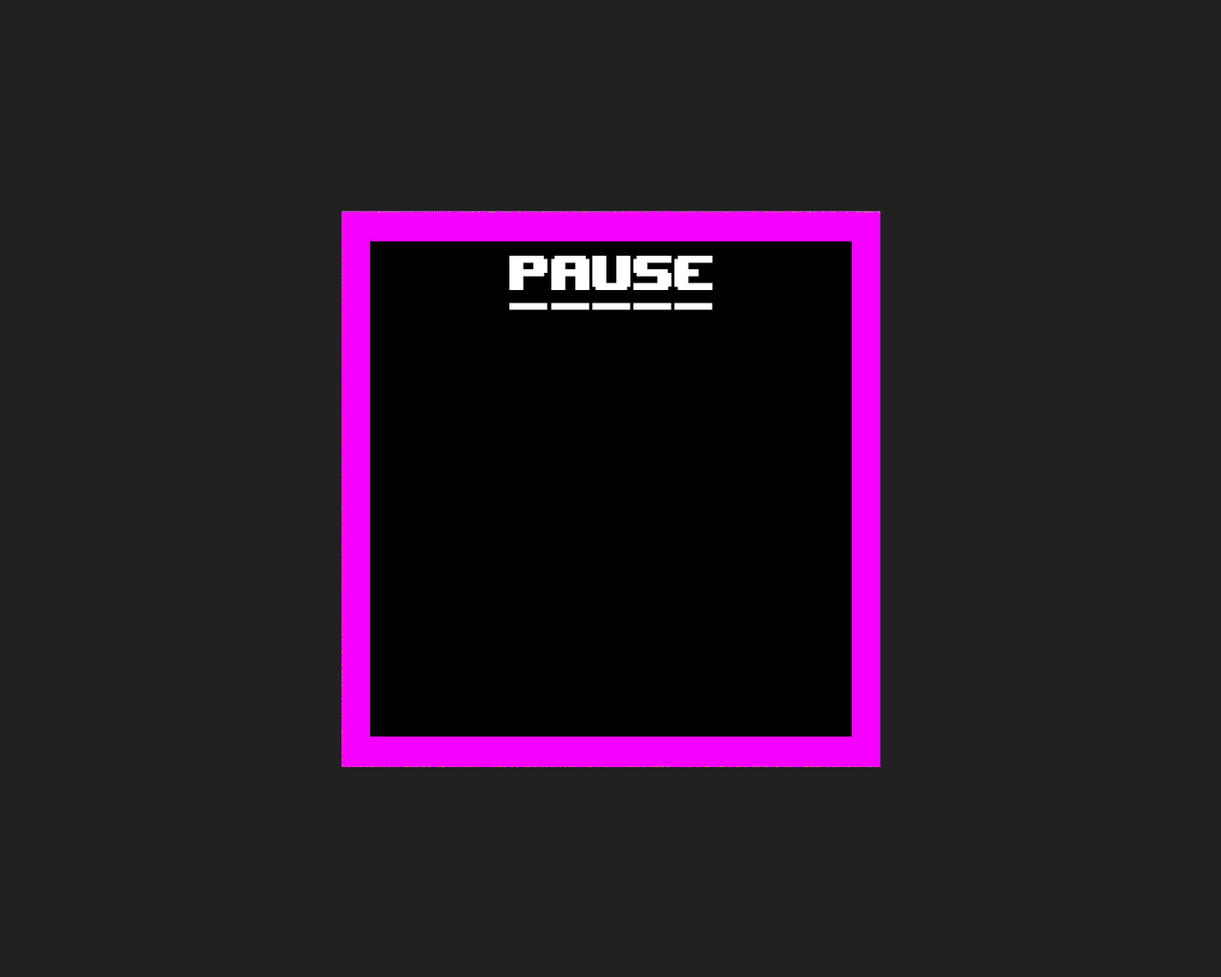
<style>
.page{position:relative;width:1221px;height:977px;background:#212121}
.page>*{position:absolute;margin:0}
.t1{font:68.7px "UpheavalTT-BRK-";color:#ffffff}
.t2{font:63.9px "UpheavalTT-BRK-";color:#ffffff;scale:1.07 1}
</style>
<div class="page">
<p class="t1" style="left:509px;top:256px;width:203px;height:34px">PAUSE</p>
<p class="t2" style="left:509px;top:302px;width:203px;height:8px">-----</p>
</div>
